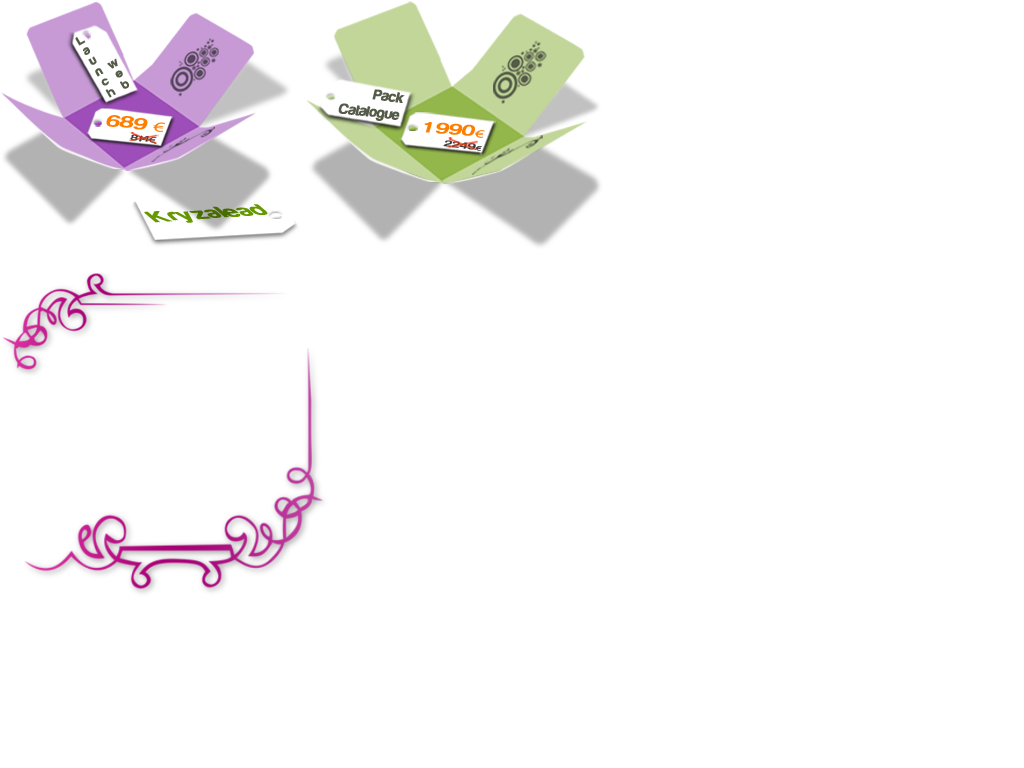
<style>
.page{position:relative;width:1024px;height:768px;background:#ffffff}
.page>*{position:absolute;margin:0}
.t1{font:13.5px "Harabara";color:#545b48;font-weight:bold;scale:0.91 1}
.t2{font:14.9px "Harabara";color:#545b48;font-weight:bold}
.t3{font:17.5px "Harabara";color:#fe7e01;scale:1.54 1}
.t4{font:14.3px "MyriadPro-Regular";color:#fe7e01;scale:1.54 1}
.t5{font:16.3px "Harabara";color:#fe7e01;scale:1.56 1}
.t6{font:11.4px "MyriadPro-Regular";color:#fe7e01;scale:1.56 1}
.t7{font:8.7px "Harabara";scale:1.61 1}
.t8{font:8.7px "MyriadPro-Regular";scale:1.61 1}
.t9{font:9.4px "Harabara";scale:1.64 1}
.t10{font:6.9px "MyriadPro-Regular";scale:1.64 1}
.t11{font:23.2px "Harabara";color:#669900;font-weight:bold;scale:1.18 1}
</style>
<div class="page">
<p class="t1" style="left:75px;top:37px;width:54px;height:61px;text-align:right;rotate:-29deg">web<br>Launch</p>
<p class="t2" style="left:338px;top:89px;width:67px;height:32px;text-align:right;rotate:7deg">Pack<br>Catalogue</p>
<p class="t3" style="left:106px;top:115px;width:59px;height:17px;rotate:5deg">689 <span class="t4">€</span></p>
<p class="t5" style="left:424px;top:121px;width:61px;height:17px;rotate:5deg">1 990<span class="t6">€</span></p>
<p class="t7" style="left:130px;top:134px;width:27px;height:9px;rotate:7deg">814<span class="t8">€</span></p>
<p class="t9" style="left:443px;top:140px;width:39px;height:11px;rotate:7deg">2249<span class="t10">€</span></p>
<p class="t11" style="left:144px;top:204px;width:124px;height:19px;rotate:-4deg">Kryzalead</p>
</div>
